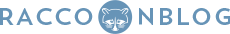
<style>
.page{position:relative;width:230px;height:34px;background:#ffffff}
.page>*{position:absolute;margin:0}
.t1{font:24px "TrendSansOne";color:#6794b7;text-transform:uppercase}
</style>
<div class="page">
<p class="t1" style="left:0px;top:8px;width:231px;height:17px">racco    nblog</p>
</div>
